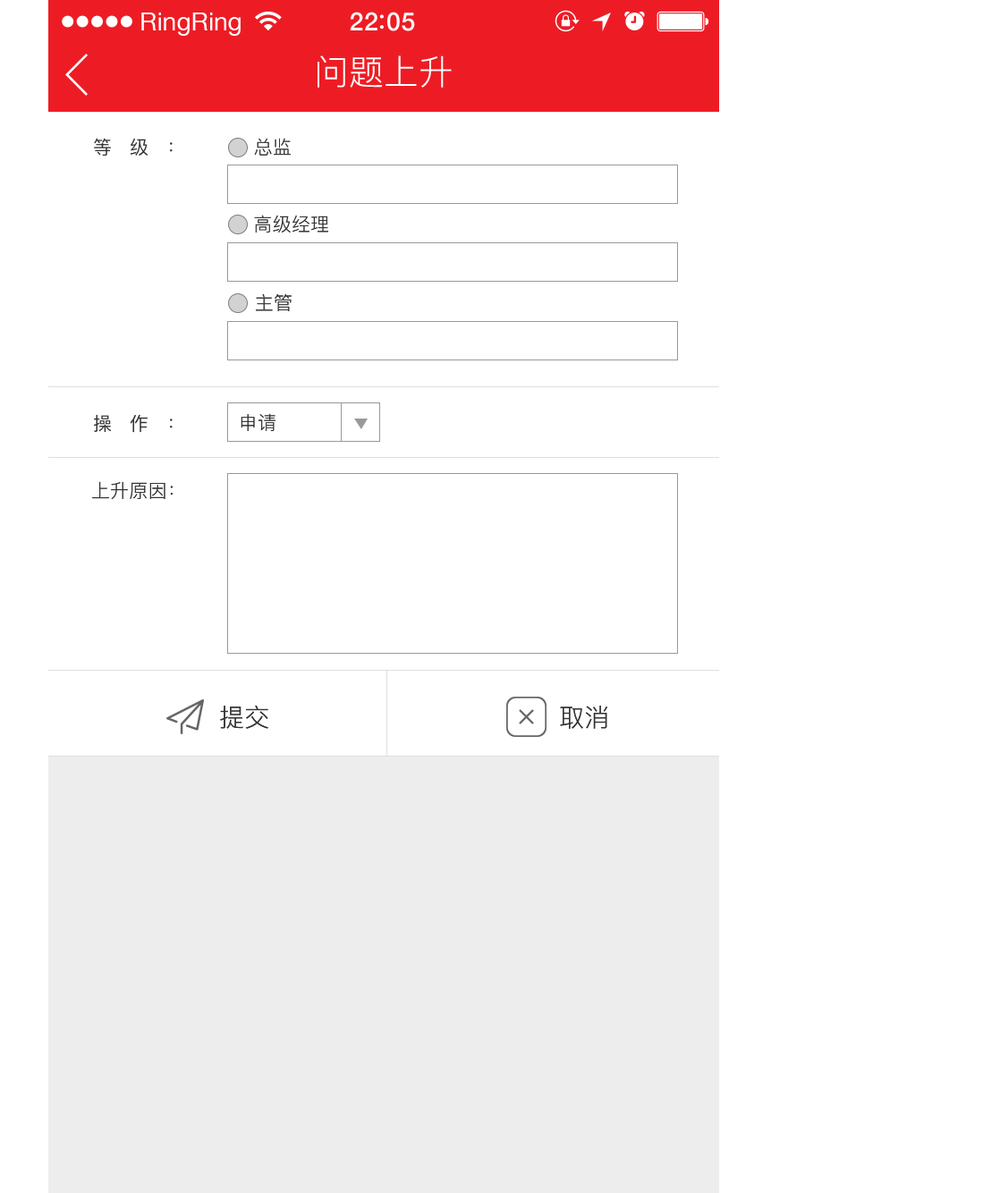
<style>
.page{position:relative;width:1000px;height:1193px;background:#ffffff}
.page>*{position:absolute;margin:0}
.t1{font:25.1px "HelveticaNeue";color:#ffffff}
.t2{font:25.1px "HelveticaNeue-Medium";letter-spacing:0.03em;color:#ffffff}
.t3{font:34.6px "PingFang-SC-Regular";letter-spacing:0.01em;color:#ffffff}
.t4{font:18.8px "PingFangSC-Regular";letter-spacing:0.95em;color:#333333}
.t5{font:18.8px "PingFang-SC-Regular";letter-spacing:0.01em;color:#333333}
.t6{font:25px "PingFang-SC-Regular";letter-spacing:0.01em;color:#333333}
</style>
<div class="page">
<p class="t1" style="left:141px;top:13px;width:100px;height:23px">RingRing</p>
<p class="t2" style="left:350px;top:12px;width:65px;height:19px">22 05</p>
<p class="t3" style="left:317px;top:55px;width:135px;height:33px">问题上升</p>
<p class="t4" style="left:94px;top:138px;width:79px;height:18px">等级：</p>
<p class="t5" style="left:254px;top:138px;width:37px;height:18px">总监</p>
<p class="t5" style="left:254px;top:215px;width:74px;height:17px">高级经理</p>
<p class="t5" style="left:256px;top:293px;width:35px;height:18px">主管</p>
<p class="t4" style="left:94px;top:414px;width:79px;height:19px">操作：</p>
<p class="t5" style="left:241px;top:413px;width:34px;height:18px">申请</p>
<p class="t5" style="left:92px;top:481px;width:81px;height:18px">上升原因：</p>
<p class="t6" style="left:220px;top:705px;width:48px;height:24px">提交</p>
<p class="t6" style="left:560px;top:705px;width:47px;height:24px">取消</p>
</div>
